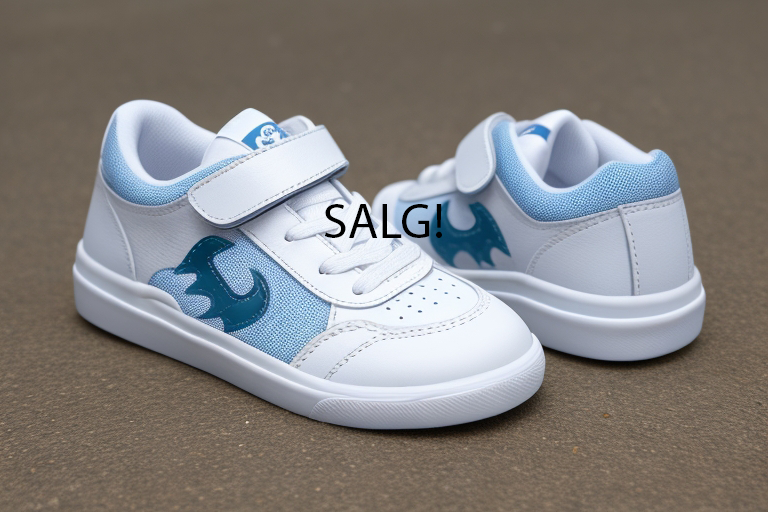
<style>
.page{position:relative;width:768px;height:512px}
.page>*{position:absolute;margin:0}
.t1{font:50px "MyriadPro-Regular";color:#000000}
</style>
<div class="page">
<p class="t1" style="left:324px;top:204px;width:118px;height:34px">SALG!</p>
</div>
